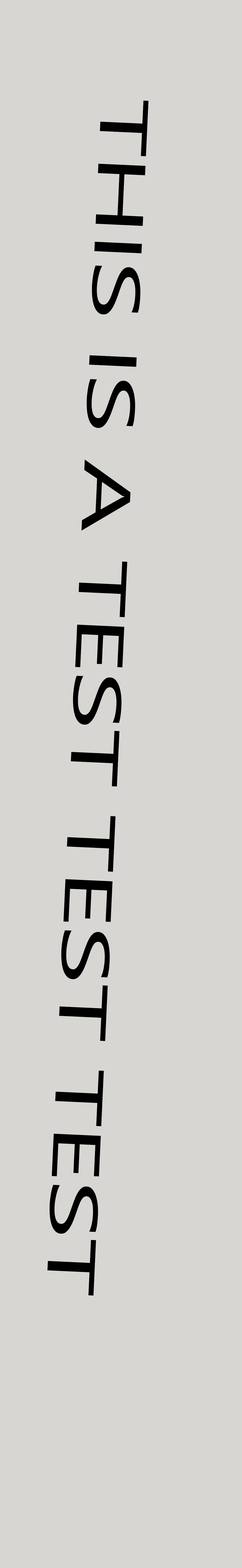
<style>
.page{position:relative;width:242px;height:1568px;background:#d7d6d3}
.page>*{position:absolute;margin:0}
.t1{font:67.2px "SegoeWP";letter-spacing:-0.025em;color:#000000;scale:1.7 1}
</style>
<div class="page">
<p class="t1" style="left:47px;top:101px;width:102px;height:1195px;rotate:93deg">THIS IS A TEST TEST TEST</p>
</div>
